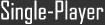
<style>
.page{position:relative;width:105px;height:25px;background:#333333}
.page>*{position:absolute;margin:0}
.t1{font:24.6px "AgencyFB-Reg";color:#ffffff}
</style>
<div class="page">
<p class="t1" style="left:1px;top:0px;width:103px;height:24px">Single-Player</p>
</div>
